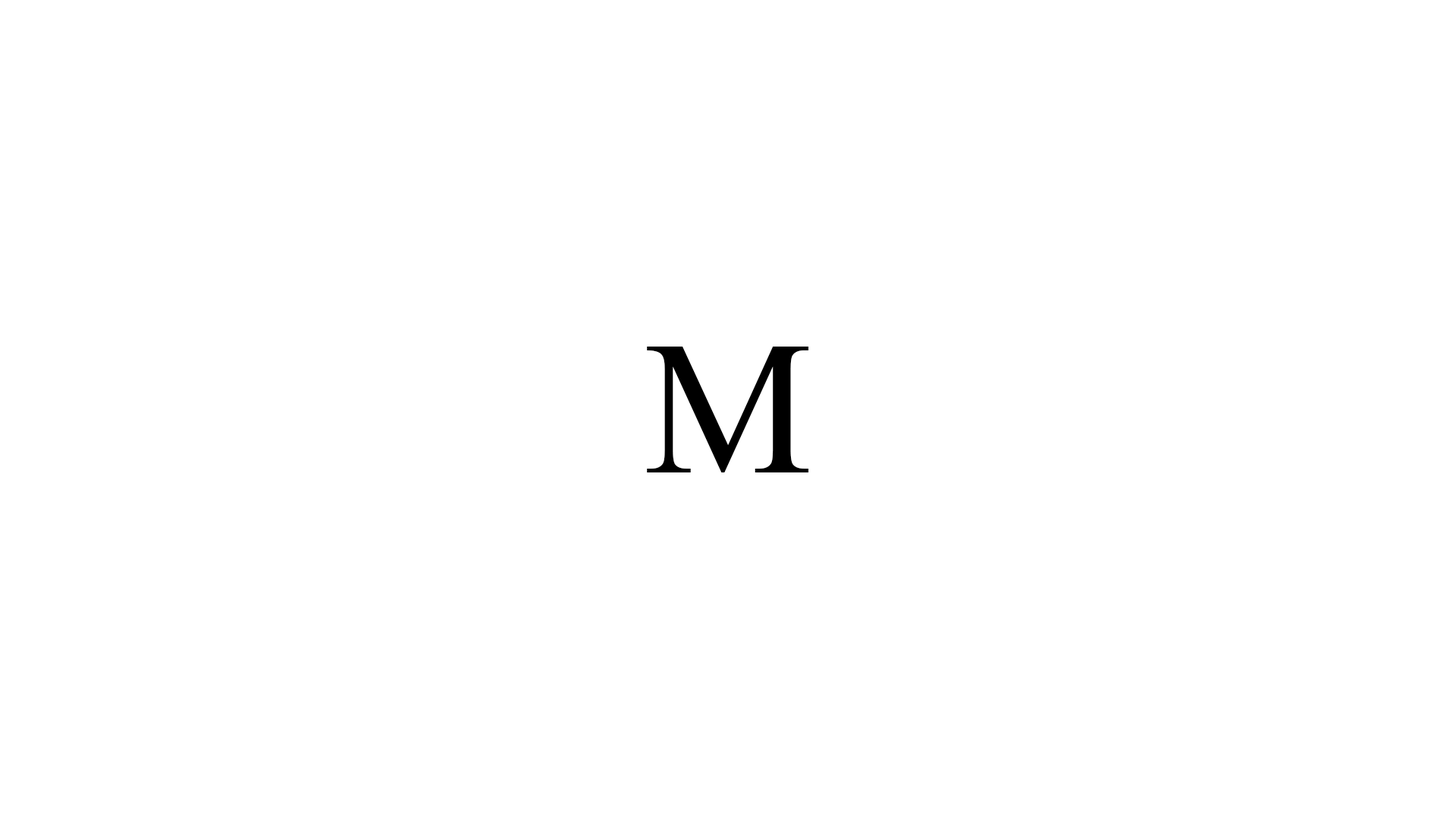
<style>
.page{position:relative;width:1456px;height:819px;background:#ffffff}
.page>*{position:absolute;margin:0}
.t1{font:189.6px "MongolianBaiti";color:#000000}
</style>
<div class="page">
<p class="t1" style="left:647px;top:347px;width:162px;height:125px">M</p>
</div>
